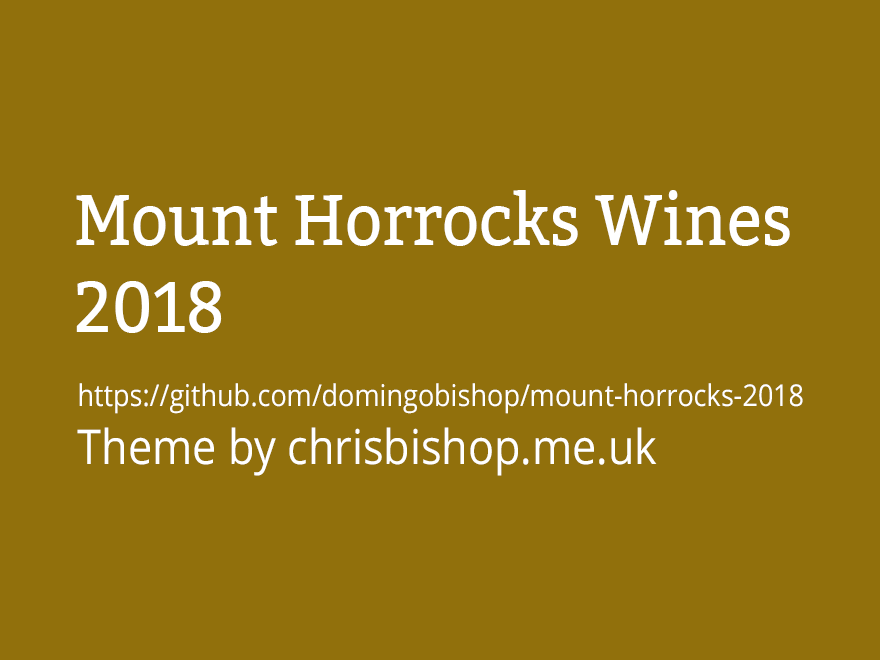
<style>
.page{position:relative;width:880px;height:660px;background:#91700c}
.page>*{position:absolute;margin:0}
.t1{font:72px "Bitter-Regular";color:#ffffff;scale:0.9 1}
.t2{font:30px "OpenSans";color:#ffffff;scale:0.9 1}
.t3{font:48px "OpenSans";color:#ffffff;scale:0.9 1}
</style>
<div class="page">
<p class="t1" style="left:76px;top:190px;width:714px;height:143px">Mount Horrocks Wines <br>2018</p>
<p class="t2" style="left:77px;top:383px;width:726px;height:93px">https://github.com/domingobishop/mount-horrocks-2018<br><span class="t3">Theme by chrisbishop.me.uk</span></p>
</div>
